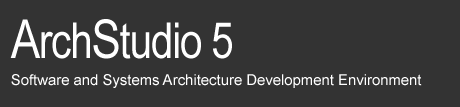
<style>
.page{position:relative;width:460px;height:107px;background:#333333}
.page>*{position:absolute;margin:0}
.t1{font:49.6px "ArialNarrow";letter-spacing:-0.025em;color:#ffffff}
.t2{font:53.8px "ArialNarrow";letter-spacing:-0.025em;color:#ffffff}
.t3{font:14.9px "ArialMT";color:#ffffff}
</style>
<div class="page">
<p class="t1" style="left:10px;top:19px;width:222px;height:40px"><span class="t2">A</span>rch<span class="t2">S</span>tudio 5</p>
<p class="t3" style="left:11px;top:74px;width:411px;height:14px">Software and Systems Architecture Development Environment</p>
</div>
